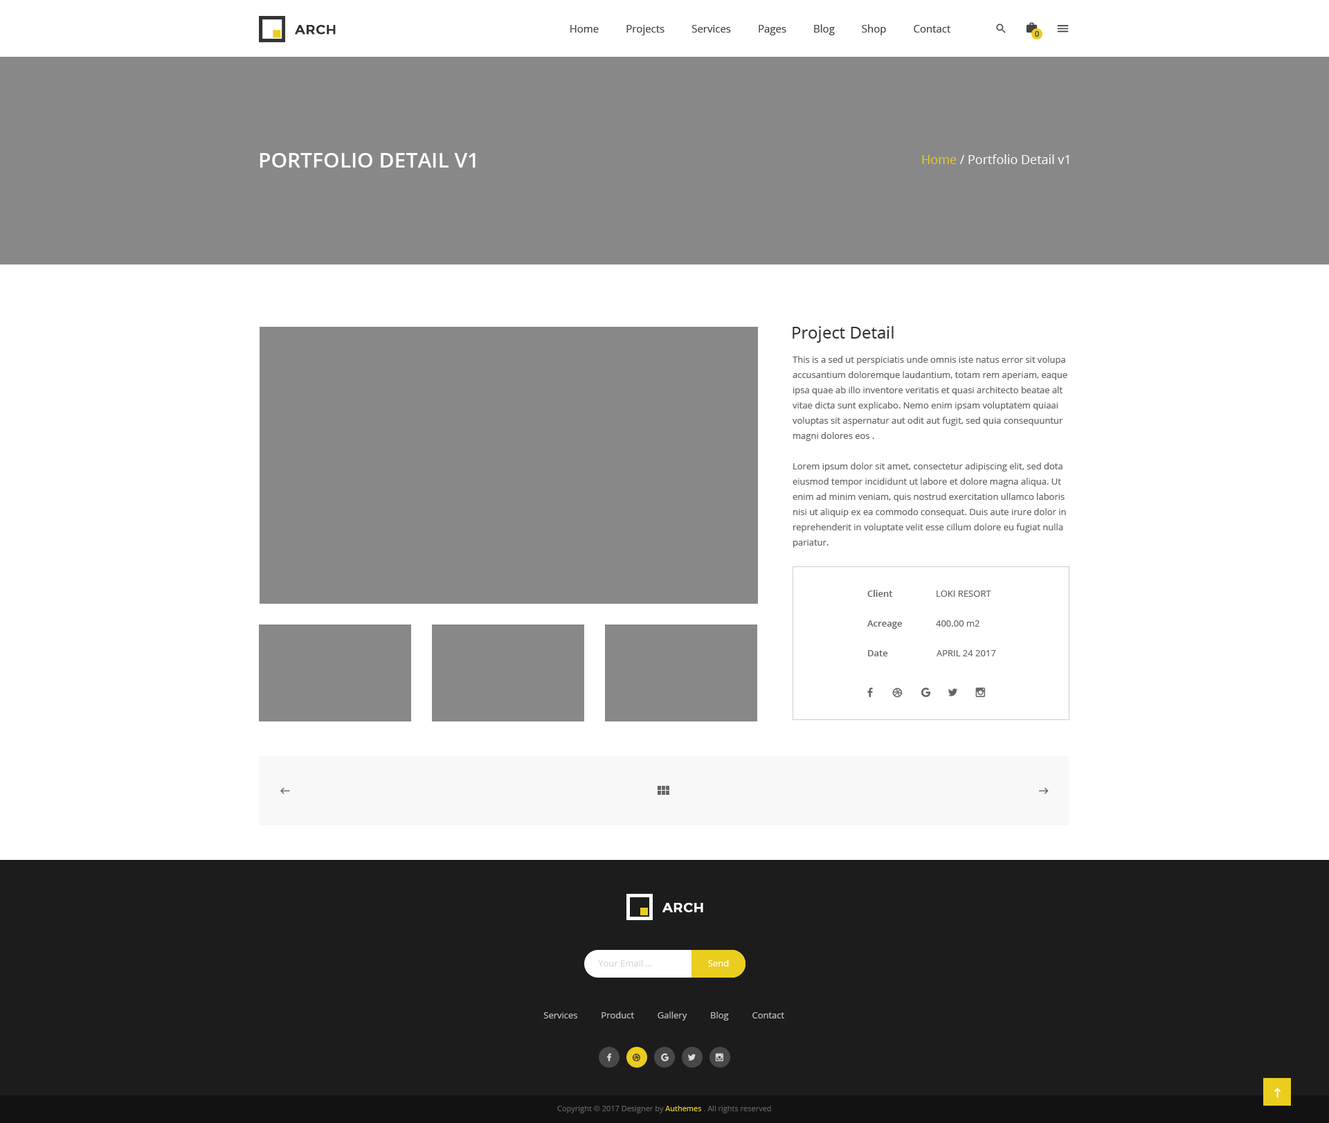
<style>
.page{position:relative;width:1329px;height:1123px;background:#ffffff}
.page>*{position:absolute;margin:0}
.t1{font:13.2px "Montserrat-Medium";letter-spacing:0.025em;color:#333333;text-transform:uppercase;font-weight:bold}
.t2{font:10.4px "OpenSans";color:#444444}
.t3{font:7.6px "OpenSans";color:#333333}
.t4{font:20.8px "OpenSans-Semibold";color:#ffffff;text-transform:uppercase}
.t5{font:12.5px "OpenSans";color:#ffffff}
.t6{font:12.5px "OpenSans";color:#ebcd1e}
.t7{font:16.6px "OpenSans";color:#333333}
.t8{font:9px/15.2px "OpenSans";color:#666666}
.t9{font:9px "OpenSans-Semibold";color:#666666}
.t10{font:9px "OpenSans";color:#666666;text-transform:uppercase}
.t11{font:9px "OpenSans";color:#666666}
.t12{font:13.2px "Montserrat-Medium";letter-spacing:0.025em;color:#ffffff;text-transform:uppercase;font-weight:bold}
.t13{font:9px "OpenSans";color:#d6d6d6}
.t14{font:9px "OpenSans";color:#ffffff}
.t15{font:9px "OpenSans";color:#c2c2c2}
.t16{font:7.6px "OpenSans";color:#626262}
.t17{font:7.6px "OpenSans";color:#ebcd1e}
</style>
<div class="page">
<p class="t1" style="left:295px;top:25px;width:41px;height:10px">arch</p>
<p class="t2" style="left:570px;top:24px;width:381px;height:11px">Home          Projects          Services          Pages          Blog          Shop          Contact</p>
<p class="t3" style="left:1035px;top:31px;width:4px;height:6px">0</p>
<p class="t4" style="left:260px;top:153px;width:216px;height:15px">Portfolio detail v1</p>
<p class="t5" style="left:922px;top:154px;width:147px;height:10px"><span class="t6">Home</span> / Portfolio Detail v1</p>
<p class="t7" style="left:793px;top:326px;width:101px;height:17px">Project Detail</p>
<p class="t8" style="left:793px;top:356px;width:275px;height:192px">This is a sed ut perspiciatis unde omnis iste natus error sit volupa accusantium doloremque laudantium, totam rem aperiam, eaque ipsa quae ab illo inventore veritatis et quasi architecto beatae alt vitae dicta sunt explicabo. Nemo enim ipsam voluptatem quiaai voluptas sit aspernatur aut odit aut fugit, sed quia consequuntur magni dolores eos .<br><br>Lorem ipsum dolor sit amet, consectetur adipiscing elit, sed dota eiusmod tempor incididunt ut labore et dolore magna aliqua. Ut enim ad minim veniam, quis nostrud exercitation ullamco laboris nisi ut aliquip ex ea commodo consequat. Duis aute irure dolor in reprehenderit in voluptate velit esse cillum dolore eu fugiat nulla pariatur.</p>
<p class="t9" style="left:867px;top:590px;width:26px;height:7px">Client</p>
<p class="t10" style="left:937px;top:591px;width:54px;height:6px">Loki Resort</p>
<p class="t9" style="left:867px;top:620px;width:35px;height:9px">Acreage</p>
<p class="t11" style="left:936px;top:620px;width:44px;height:7px">400.00 m2</p>
<p class="t9" style="left:868px;top:650px;width:20px;height:6px">Date</p>
<p class="t10" style="left:937px;top:650px;width:59px;height:6px">April 24 2017</p>
<p class="t12" style="left:663px;top:903px;width:40px;height:9px">arch</p>
<p class="t13" style="left:598px;top:960px;width:55px;height:6px">Your Email ...</p>
<p class="t14" style="left:708px;top:960px;width:21px;height:6px">Send</p>
<p class="t15" style="left:543px;top:1011px;width:241px;height:9px">Services          Product          Gallery          Blog          Contact</p>
<p class="t16" style="left:557px;top:1106px;width:214px;height:7px">Copyright © 2017 Designer by <span class="t17">Authemes </span>. All rights reserved</p>
</div>
